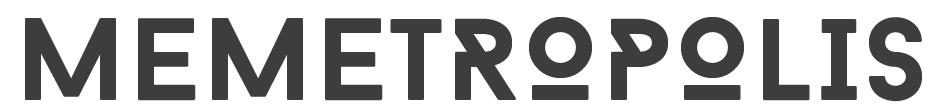
<style>
.page{position:relative;width:944px;height:112px;background:#ffffff}
.page>*{position:absolute;margin:0}
.t1{font:116.4px "BaronNeueBold";letter-spacing:0.025em;color:#3e3d3d;scale:1.03 1}
</style>
<div class="page">
<p class="t1" style="left:25px;top:17px;width:897px;height:85px">MEMETROPOLIS</p>
</div>
